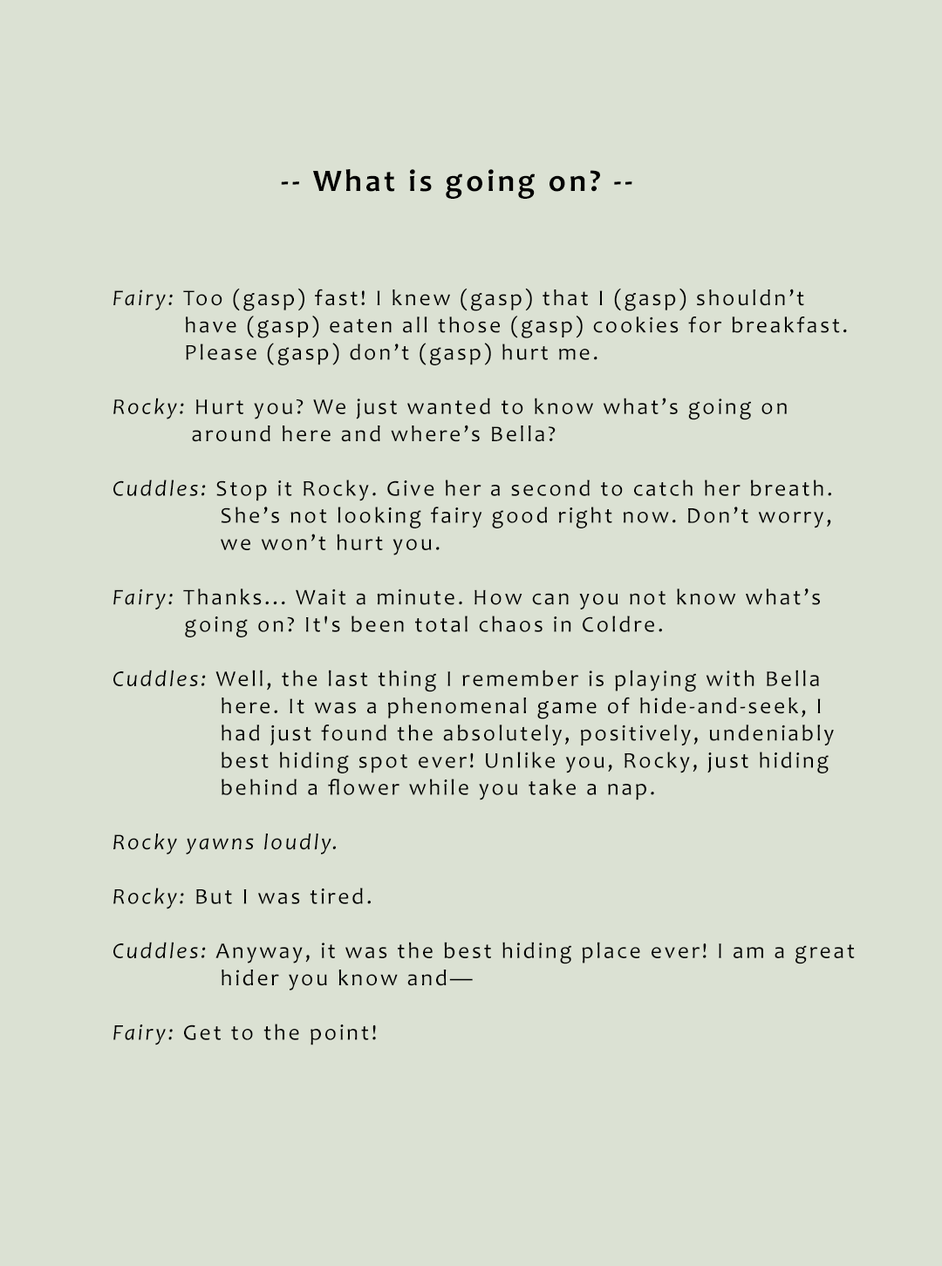
<style>
.page{position:relative;width:942px;height:1266px;background:#dbe1d3}
.page>*{position:absolute;margin:0}
.t1{font:31.4px "Candara-Bold";letter-spacing:0.1em;color:#000000}
.t2{font:22.7px "Candara";letter-spacing:0.1em;color:#000000}
.t3{font:22.7px "Candara-Italic";letter-spacing:0.1em;color:#000000}
</style>
<div class="page">
<p class="t1" style="left:281px;top:169px;width:351px;height:30px">-- What is going on? --</p>
<p class="t2" style="left:113px;top:288px;width:742px;height:758px"><span class="t3">Fairy: </span>Too (gasp) fast! I knew (gasp) that I (gasp) shouldn’t <br>          have (gasp) eaten all those (gasp) cookies for breakfast. <br>          Please (gasp) don’t (gasp) hurt me.<br><br><span class="t3">Rocky: </span>Hurt you? We just wanted to know what’s going on <br>           around here and where’s Bella?<br><br><span class="t3">Cuddles: </span>Stop it Rocky. Give her a second to catch her breath. <br>               She’s not looking fairy good right now. Don’t worry, <br>               we won’t hurt you.<br><br><span class="t3">Fairy: </span>Thanks... Wait a minute. How can you not know what’s <br>          going on? It's been total chaos in Coldre.<br><br><span class="t3">Cuddles: </span>Well, the last thing I remember is playing with Bella <br>               here. It was a phenomenal game of hide-and-seek, I <br>               had just found the absolutely, positively, undeniably <br>               best hiding spot ever! Unlike you, Rocky, just hiding <br>               behind a flower while you take a nap.<br><span class="t3"><br>Rocky yawns loudly.<br><br>Rocky:</span> But I was tired.<br><span class="t3"><br>Cuddles: </span>Anyway, it was the best hiding place ever! I am a great <br>               hider you know and—<br><span class="t3"><br>Fairy: </span>Get to the point!</p>
</div>
